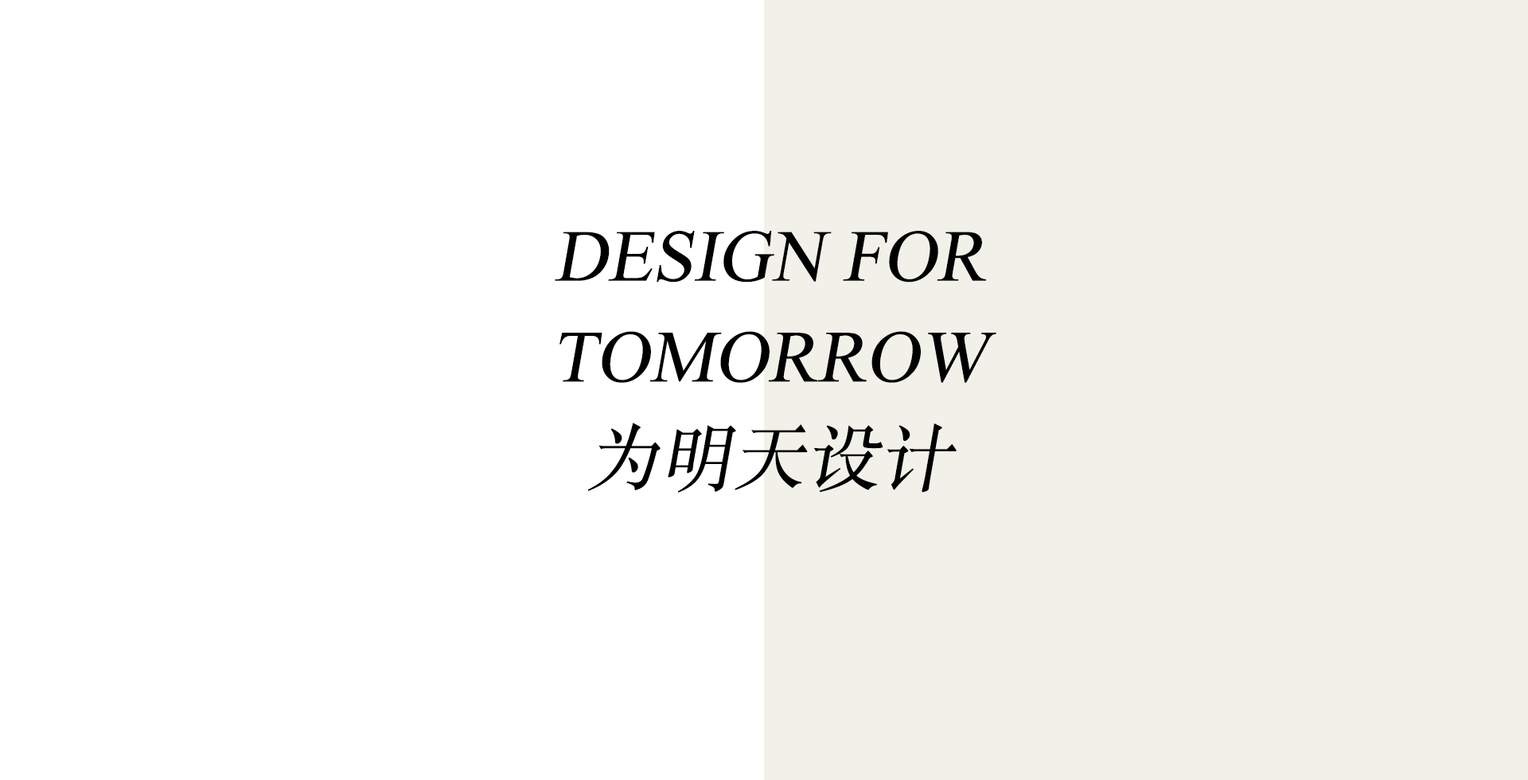
<style>
.page{position:relative;width:1528px;height:780px;background:#ffffff}
.page>*{position:absolute;margin:0}
.t1{font:73.6px "TimesNewRomanPSMT";color:#000000;font-style:italic}
.t2{font:73.6px "STSongti-SC-Regular";color:#000000;font-style:italic}
</style>
<div class="page">
<p class="t1" style="left:555px;top:231px;width:442px;height:262px;text-align:center">DESIGN FOR<br>TOMORROW<br><span class="t2">为明天设计</span></p>
</div>
